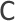
<style>
.page{position:relative;width:15px;height:21px;background:#ffffff}
.page>*{position:absolute;margin:0}
.t1{font:30px "Calibri";color:#3c3c3c}
</style>
<div class="page">
<p class="t1" style="left:0px;top:0px;width:15px;height:21px">C</p>
</div>
